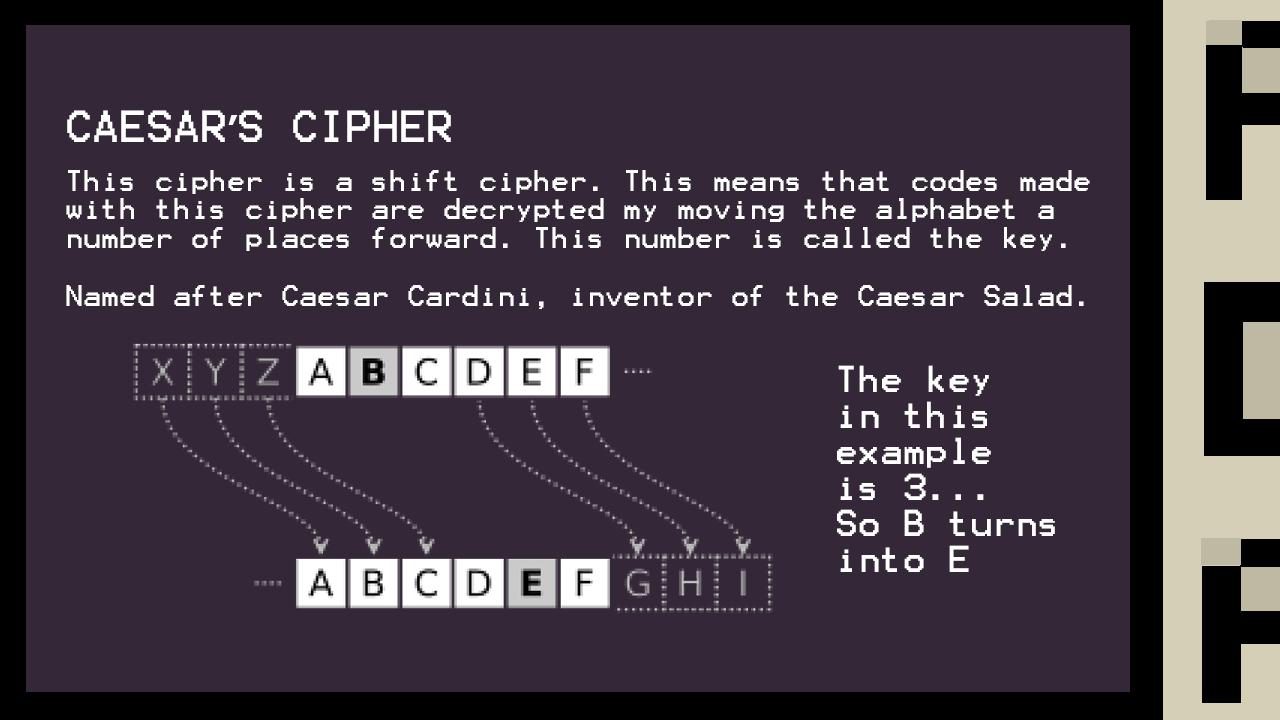
<style>
.page{position:relative;width:1280px;height:720px;background:#342838}
.page>*{position:absolute;margin:0}
.t1{font:36px "Terminal";color:#ffffff}
.t2{font:36px "Tahoma-Bold";color:#ffffff}
.t3{font:24px "Terminal";color:#ffffff}
.t4{font:30px "Terminal";color:#ffffff}
</style>
<div class="page">
<p class="t1" style="left:67px;top:110px;width:384px;height:32px">CAESAR<span class="t2">’</span>S CIPHER</p>
<p class="t3" style="left:66px;top:170px;width:1024px;height:139px">This cipher is a shift cipher. This means that codes made with this cipher are decrypted my moving the alphabet a number of places forward. This number is called the key.<br><br>Named after Caesar Cardini, inventor of the Caesar Salad.</p>
<p class="t4" style="left:837px;top:365px;width:218px;height:207px">The key<br>in this<br>example<br>is 3...<br>So B turns into E</p>
</div>
